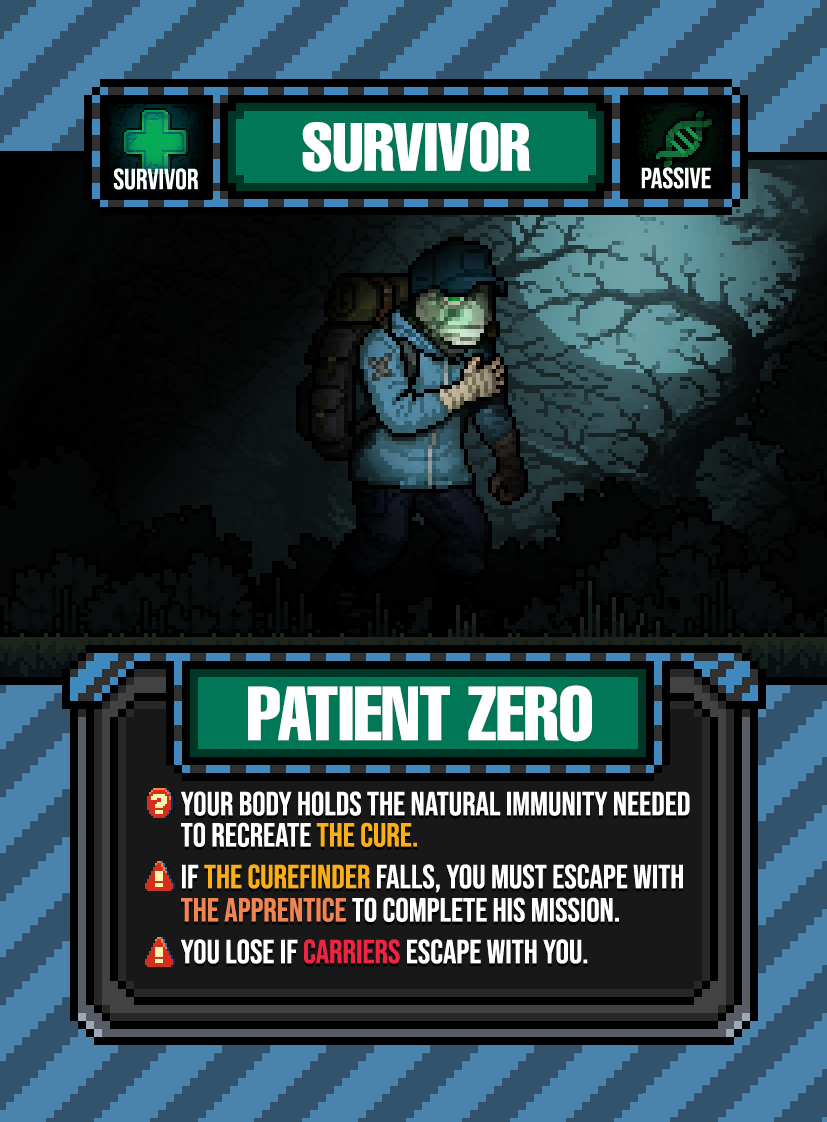
<style>
.page{position:relative;width:827px;height:1122px}
.page>*{position:absolute;margin:0}
.t1{font:66.7px "HelveticaLTPro-Compressed";color:#ffffff}
.t2{font:75px "HelveticaLTPro-Compressed";color:#ffffff}
.t3{font:33.3px/31.2px "BebasNeue-Regular";color:#ffffff}
.t4{font:33.3px/31.2px "BebasNeue-Regular";color:#fbae18}
.t5{font:33.3px/41.7px "BebasNeue-Regular";color:#ffffff}
.t6{font:33.3px/41.7px "BebasNeue-Regular";color:#fbae18}
.t7{font:33.3px/33.3px "BebasNeue-Regular";color:#f08554}
.t8{font:33.3px/33.3px "BebasNeue-Regular";color:#ffffff}
.t9{font:33.3px/41.7px "BebasNeue-Regular";color:#ee2542}
</style>
<div class="page">
<p class="t1" style="left:302px;top:122px;width:229px;height:50px">SURVIVOR</p>
<p class="t2" style="left:248px;top:685px;width:344px;height:57px">PATIENT ZERO</p>
<p class="t3" style="left:181px;top:791px;width:509px;height:173px">Your body holds the natural immunity needed to recreate <span class="t4">the cure. <br></span><span class="t5">If </span><span class="t6">the Curefinder</span><span class="t5"> falls, you must escape with </span><span class="t7">the Apprentice</span><span class="t8"> to complete his mission. <br></span><span class="t5">you lose if </span><span class="t9">Carriers</span><span class="t5"> escape with you.</span></p>
</div>
